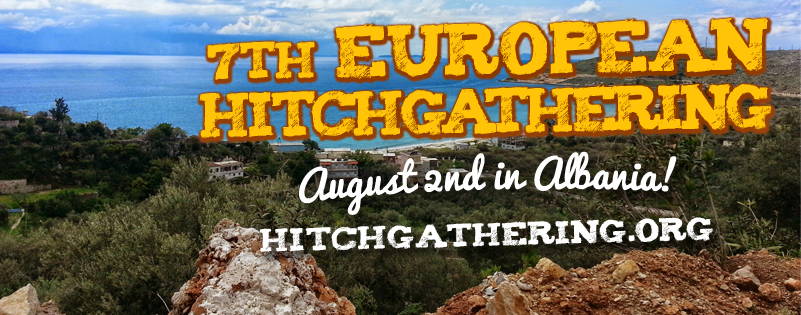
<style>
.page{position:relative;width:801px;height:315px}
.page>*{position:absolute;margin:0}
.t1{font:51.2px/58.3px "Tiza";letter-spacing:-0.09em;color:#ffc307;text-transform:uppercase;scale:0.9 1}
.t2{font:41.8px/50.9px "Tiza";letter-spacing:-0.01em;color:#ffc307;text-transform:uppercase;scale:0.9 1}
.t3{font:59.3px/50.9px "Tiza";letter-spacing:-0.01em;color:#ffc307;text-transform:uppercase;scale:0.9 1}
.t4{font:39.2px "Pacifico";color:#ffffff}
.t5{font:26.4px "Tiza";color:#ffffff;text-transform:uppercase}
</style>
<div class="page">
<p class="t1" style="left:199px;top:18px;width:573px;height:120px;text-align:center;rotate:-1deg"><span class="t2">7th </span><span class="t3">European <br></span>Hitchgathering</p>
<p class="t4" style="left:299px;top:151px;width:378px;height:64px;rotate:-2deg">August 2nd in Albania!</p>
<p class="t5" style="left:259px;top:217px;width:454px;height:35px;rotate:-2deg">hitchgathering.org</p>
</div>
